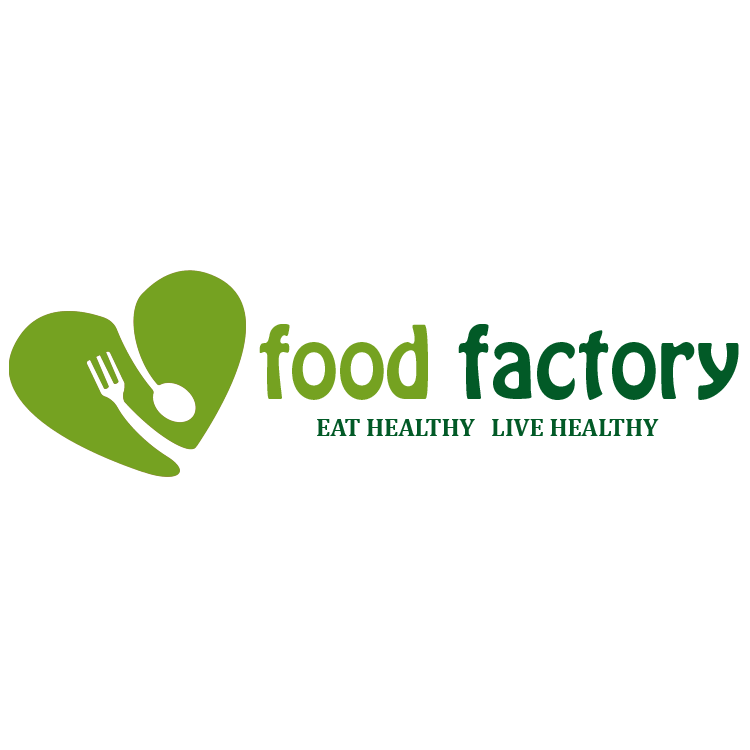
<style>
.page{position:relative;width:750px;height:750px;background:#ffffff}
.page>*{position:absolute;margin:0}
.t1{font:87.5px "HoboStd";color:#025a27}
.t2{font:87.5px "HoboStd";color:#75a221}
.t3{font:25px "Cambria-Bold";color:#025a27}
</style>
<div class="page">
<p class="t1" style="left:259px;top:324px;width:480px;height:76px"><span class="t2">food </span>factory</p>
<p class="t3" style="left:317px;top:419px;width:342px;height:17px">EAT HEALTHY   LIVE HEALTHY</p>
</div>
